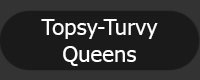
<style>
.page{position:relative;width:200px;height:80px;background:#1a1a1a}
.page>*{position:absolute;margin:0}
.t1{font:22.1px "Tahoma";color:#ffffff}
</style>
<div class="page">
<p class="t1" style="left:41px;top:19px;width:117px;height:47px">Topsy-Turvy<br>     Queens</p>
</div>
